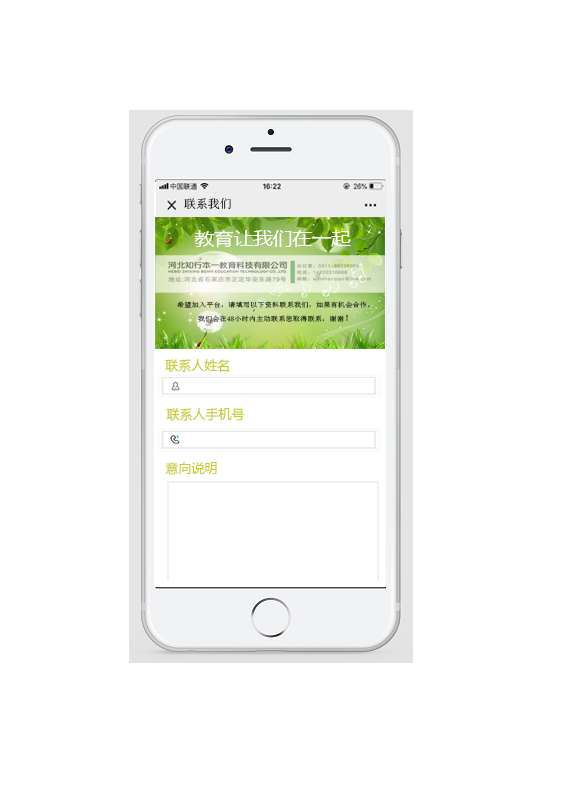
<style>
.page{position:relative;width:566px;height:800px;background:#ffffff}
.page>*{position:absolute;margin:0}
.t1{font:12px "SimSun"}
.t2{font:17.6px "MicrosoftYaHei";color:#ffffff;scale:1.11 1}
.t3{font:6.6px "NSimSun";color:#383f26;scale:1.11 1}
.t4{font:8.8px "NSimSun";color:#383f26;scale:1.11 1}
.t5{font:13px "MicrosoftYaHei";color:#c7cc29}
</style>
<div class="page">
<p class="t1" style="left:184px;top:198px;width:47px;height:11px">联系我们</p>
<p class="t2" style="left:194px;top:230px;width:157px;height:18px">教育让我们在一起</p>
<p class="t3" style="left:177px;top:301px;width:193px;height:21px;text-align:center">希望加入平台，请填写以下资料联系我们，如果有机会合作，          我们会在48小时内主动联系您取得联系，谢谢<span class="t4">！</span></p>
<p class="t5" style="left:165px;top:359px;width:64px;height:13px">联系人姓名</p>
<p class="t5" style="left:166px;top:408px;width:79px;height:13px">联系人手机号</p>
<p class="t5" style="left:165px;top:462px;width:52px;height:13px">意向说明</p>
</div>
